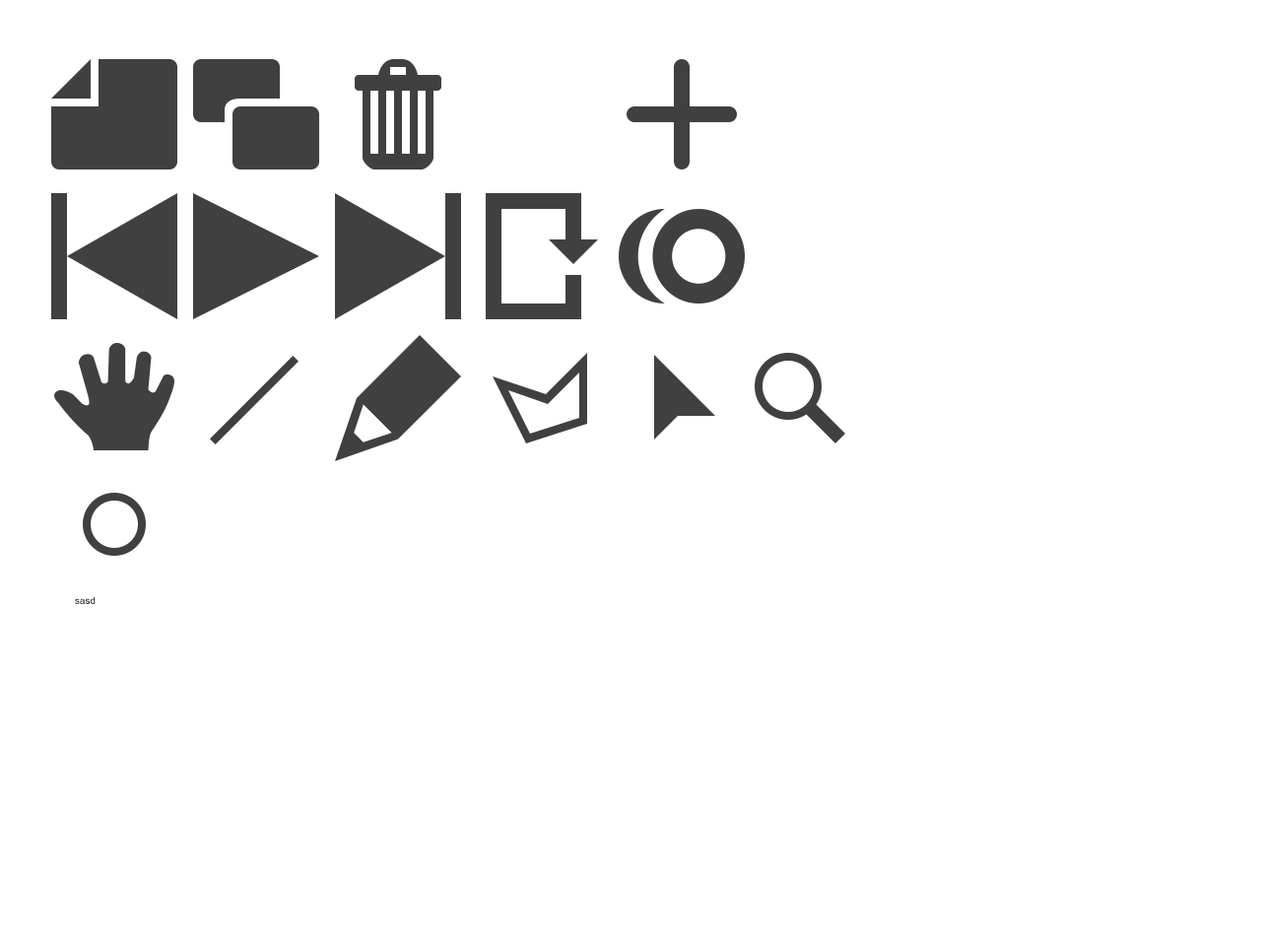
<style>
.page{position:relative;width:1261px;height:946px;background:#ffffff}
.page>*{position:absolute;margin:0}
.t1{font:9.9px "MS Sans Serif";color:#000000}
</style>
<div class="page">
<p class="t1" style="left:75px;top:596px;width:21px;height:8px">sasd</p>
</div>
